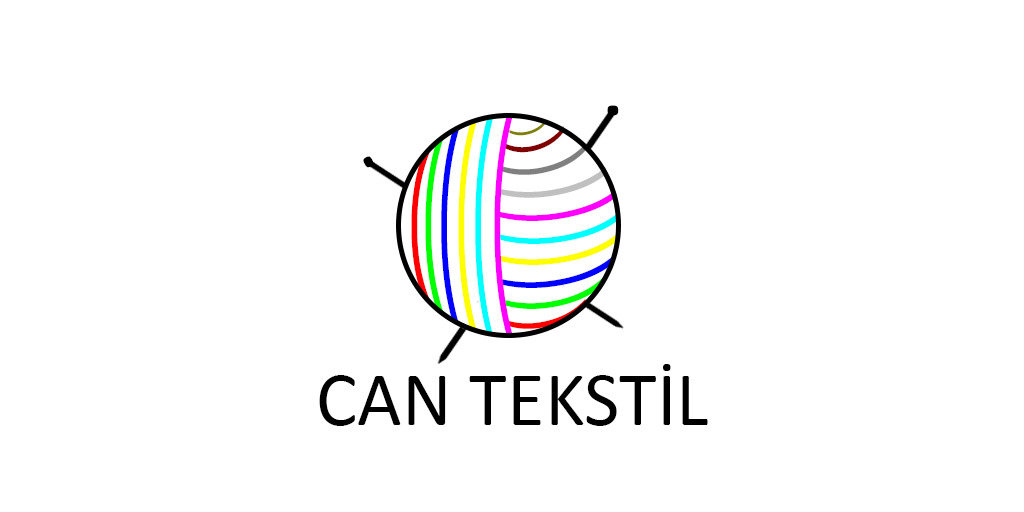
<style>
.page{position:relative;width:1024px;height:512px;background:#ffffff}
.page>*{position:absolute;margin:0}
.t1{font:86.8px "Calibri";color:#000000;scale:1.18 1}
.t2{font:240px "Ebrima";color:#ffff00;scale:0.33 1}
.t3{font:250px "Ebrima";color:#00ffff;scale:0.31 1}
.t4{font:252.3px "Ebrima";color:#ff00ff;scale:0.32 1}
.t5{font:72.3px "Ebrima";color:#800000}
.t6{font:43.3px "Ebrima";color:#808000;scale:0.95 1}
.t7{font:225px "Ebrima";color:#0000ff;scale:0.35 1}
.t8{font:202px "Ebrima";color:#00ff00;scale:0.39 1}
.t9{font:102px "Ebrima";color:#808080;scale:0.78 1}
.t10{font:91.9px "Calibri";color:#000000;scale:0.91 1}
.t11{font:170px "Ebrima";color:#ff0000;scale:0.47 1}
.t12{font:129px "Ebrima";color:#c0c0c0;scale:0.63 1}
.t13{font:139.4px "Ebrima";color:#ff00ff;scale:0.58 1}
.t14{font:139.4px "Ebrima";color:#00ffff;scale:0.58 1}
.t15{font:139.4px "Ebrima";color:#ffff00;scale:0.58 1}
.t16{font:134.6px "Ebrima";color:#0000ff;scale:0.6 1}
.t17{font:118.7px "Ebrima";color:#00ff00;scale:0.68 1}
.t18{font:98.2px "Ebrima";scale:0.81 1}
.t19{font:77.3px "Calibri";color:#000000}
</style>
<div class="page">
<p class="t1" style="left:607px;top:105px;width:12px;height:11px">.</p>
<p class="t2" style="left:458px;top:123px;width:19px;height:207px">(</p>
<p class="t3" style="left:475px;top:119px;width:18px;height:215px">(</p>
<p class="t4" style="left:494px;top:117px;width:19px;height:218px">(</p>
<p class="t5" style="left:503px;top:126px;width:62px;height:27px;rotate:-99deg">(</p>
<p class="t6" style="left:509px;top:120px;width:37px;height:16px;rotate:-99deg">(</p>
<p class="t7" style="left:441px;top:129px;width:18px;height:194px">(</p>
<p class="t8" style="left:425px;top:138px;width:19px;height:175px">(</p>
<p class="t9" style="left:499px;top:145px;width:87px;height:30px;rotate:-105deg">(</p>
<p class="t10" style="left:363px;top:156px;width:11px;height:12px;rotate:151deg">.</p>
<p class="t11" style="left:411px;top:153px;width:19px;height:146px">(</p>
<p class="t12" style="left:496px;top:167px;width:112px;height:31px;rotate:-108deg">(</p>
<p class="t13" style="left:496px;top:190px;width:122px;height:31px;rotate:-110deg">(</p>
<p class="t14" style="left:498px;top:213px;width:122px;height:31px;rotate:-110deg">(</p>
<p class="t15" style="left:497px;top:234px;width:122px;height:31px;rotate:-110deg">(</p>
<p class="t16" style="left:497px;top:257px;width:116px;height:31px;rotate:-109deg">(</p>
<p class="t17" style="left:501px;top:278px;width:103px;height:31px;rotate:-107deg">(</p>
<p class="t18" style="left:503px;top:299px;width:84px;height:30px;rotate:-104deg">(</p>
<p class="t19" style="left:319px;top:364px;width:389px;height:62px">CAN TEKSTİL</p>
</div>
